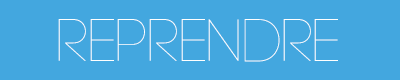
<style>
.page{position:relative;width:400px;height:80px;background:#43a7df}
.page>*{position:absolute;margin:0}
.t1{font:60px "Code-Light";color:#ffffff}
</style>
<div class="page">
<p class="t1" style="left:58px;top:19px;width:280px;height:43px">reprendre</p>
</div>
